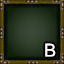
<style>
.page{position:relative;width:64px;height:64px}
.page>*{position:absolute;margin:0}
.t1{font:18px "ArialMT";letter-spacing:0.075em;color:#ffffff}
</style>
<div class="page">
<p class="t1" style="left:45px;top:43px;width:11px;height:14px">B</p>
</div>
